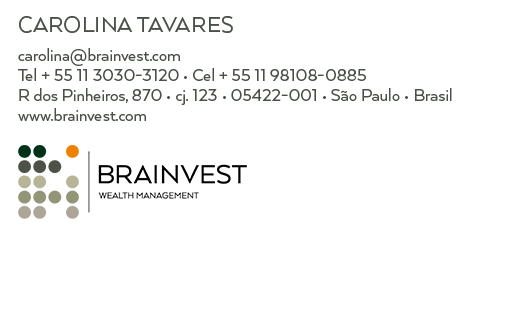
<style>
.page{position:relative;width:531px;height:325px;background:#ffffff}
.page>*{position:absolute;margin:0}
.t1{font:25px "Arquitecta";color:#485047;text-transform:uppercase}
.t2{font:19px/20px "Arquitecta";letter-spacing:-0.005em;color:#485047}
</style>
<div class="page">
<p class="t1" style="left:19px;top:16px;width:214px;height:17px">Carolina Tavares</p>
<p class="t2" style="left:18px;top:48px;width:434px;height:73px">carolina@brainvest.com<br>Tel + 55 11 3030-3120 • Cel + 55 11 98108-0885<br>R dos Pinheiros, 870 • cj. 123 • 05422-001 • São Paulo • Brasil<br>www.brainvest.com</p>
</div>
